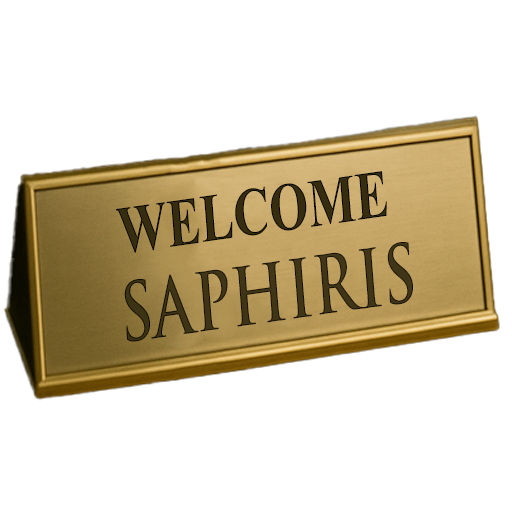
<style>
.page{position:relative;width:512px;height:512px;background:#ffffff}
.page>*{position:absolute;margin:0}
.t1{font:68px "TimesNewRomanPS-BoldMT";color:#362d11;scale:0.74 1}
.t2{font:78.5px "TrajanPro-Bold";color:#362d11;scale:0.74 1}
</style>
<div class="page">
<p class="t1" style="left:116px;top:171px;width:271px;height:82px;rotate:-8deg">WELCOME</p>
<p class="t2" style="left:124px;top:242px;width:289px;height:100px;rotate:-8deg;opacity:0.95">SAPHIRIS</p>
</div>
